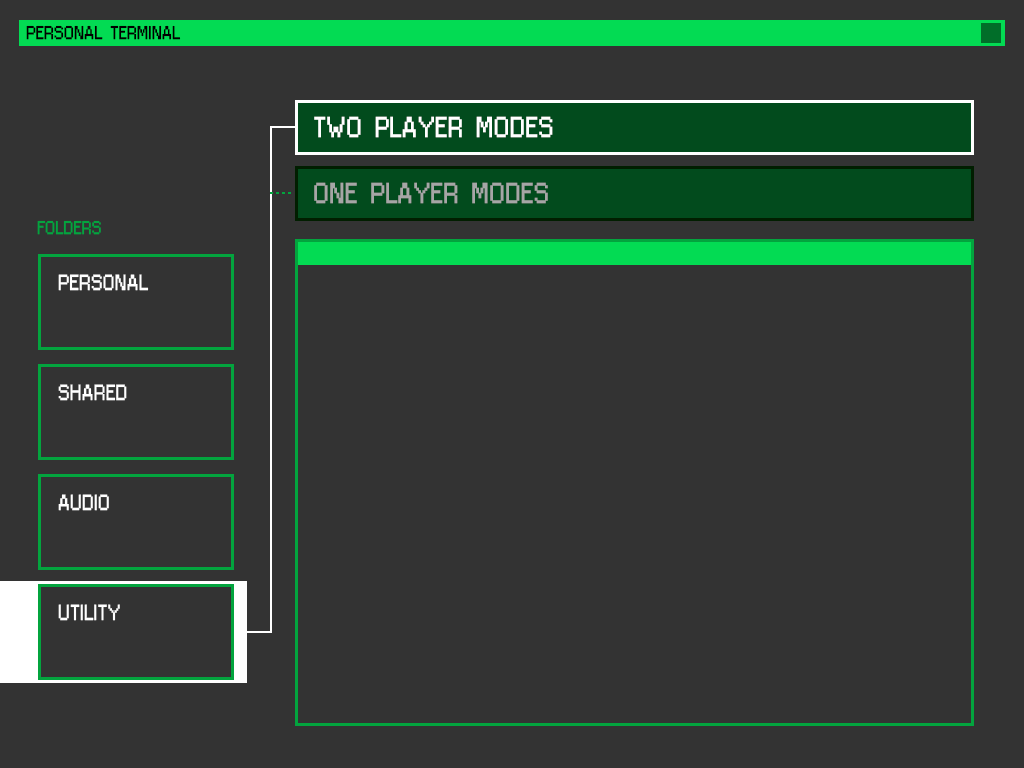
<style>
.page{position:relative;width:1024px;height:768px;background:#333333}
.page>*{position:absolute;margin:0}
.t1{font:16px "Jixellation";color:#000000}
.t2{font:25px "Jixellation";color:#ffffff}
.t3{font:25px "Jixellation";color:#a6a6a6}
.t4{font:16px "Jixellation";color:#03a43e}
.t5{font:19px "Jixellation";color:#ffffff}
</style>
<div class="page">
<p class="t1" style="left:26px;top:25px;width:155px;height:15px">PERSONAL TERMINAL</p>
<p class="t2" style="left:314px;top:116px;width:239px;height:22px">TWO PLAYER MODES</p>
<p class="t3" style="left:314px;top:182px;width:234px;height:22px"><span class="t2"><br></span>ONE PLAYER MODES</p>
<p class="t4" style="left:37px;top:220px;width:64px;height:15px">FOLDERS</p>
<p class="t5" style="left:58px;top:274px;width:91px;height:17px">PERSONAL</p>
<p class="t5" style="left:58px;top:384px;width:69px;height:17px">SHARED</p>
<p class="t5" style="left:58px;top:494px;width:51px;height:17px">AUDIO</p>
<p class="t5" style="left:58px;top:604px;width:62px;height:17px">UTILITY</p>
</div>
